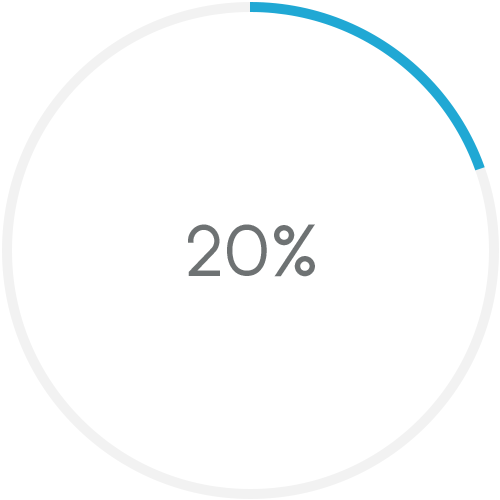
<style>
.page{position:relative;width:500px;height:500px;background:#ffffff}
.page>*{position:absolute;margin:0}
.t1{font:72px "Neou-Bold";color:#6e7273}
</style>
<div class="page">
<p class="t1" style="left:188px;top:224px;width:127px;height:53px">20%</p>
</div>
